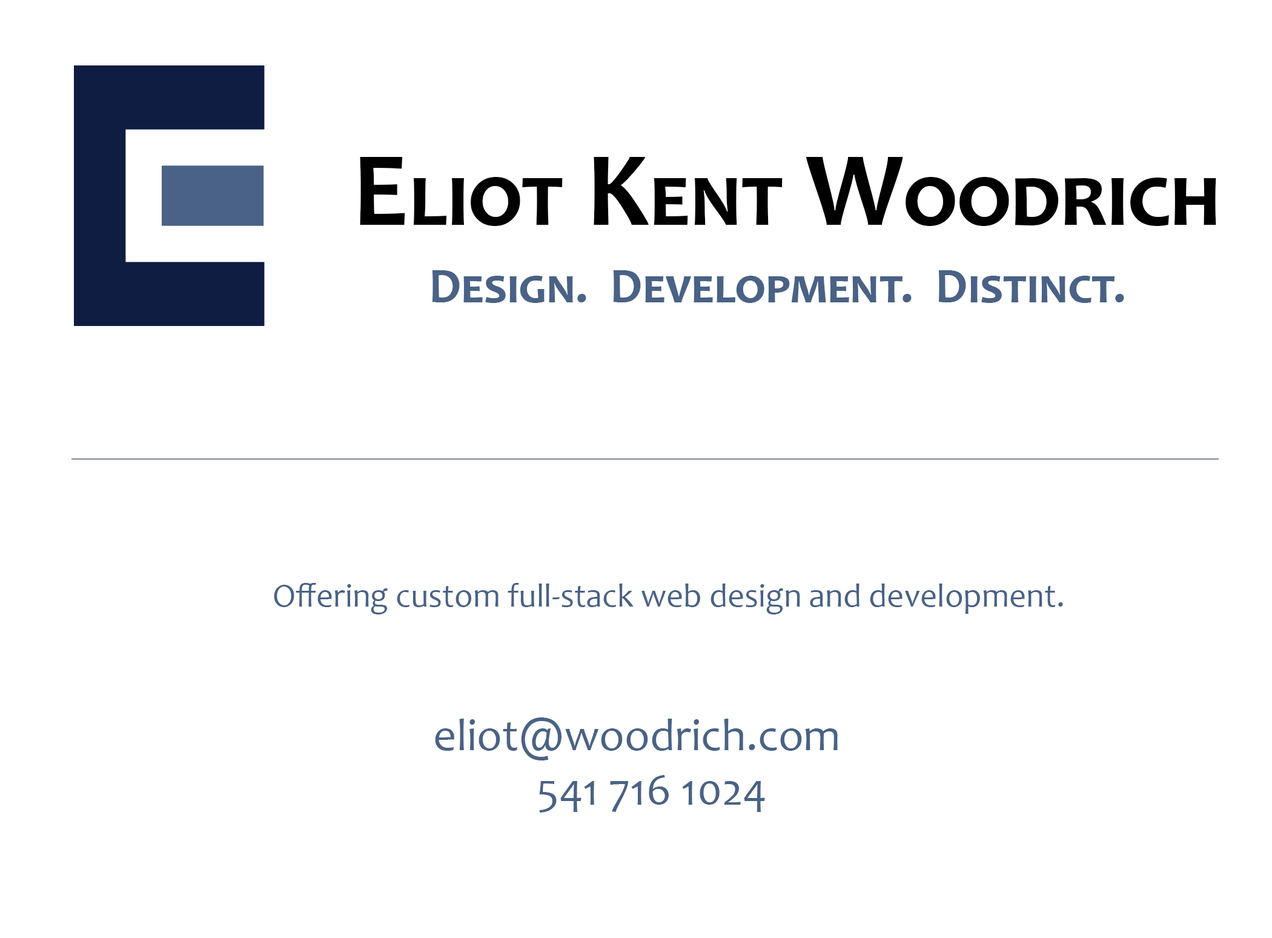
<style>
.page{position:relative;width:1272px;height:938px;background:#ffffff}
.page>*{position:absolute;margin:0}
.t1{font:88.8px "Candara-Bold";color:#000000;font-variant:small-caps}
.t2{font:106.6px "Candara-Bold";color:#000000;font-variant:small-caps}
.t3{font:50.3px "Candara-Bold";color:#496285;font-variant:small-caps}
.t4{font:33.3px "Candara";color:#496285}
.t5{font:45.4px "Candara";color:#496285}
</style>
<div class="page">
<p class="t1" style="left:360px;top:157px;width:856px;height:69px"><span class="t2">E</span>liot<span class="t2"> K</span>ent<span class="t2"> W</span>oodrich</p>
<p class="t3" style="left:432px;top:270px;width:692px;height:33px">Design.  Development.  Distinct.</p>
<p class="t4" style="left:274px;top:583px;width:789px;height:31px">Offering custom full-stack web design and development.</p>
<p class="t5" style="left:435px;top:717px;width:403px;height:95px;text-align:center">eliot@woodrich.com   <br>541 716 1024</p>
</div>
